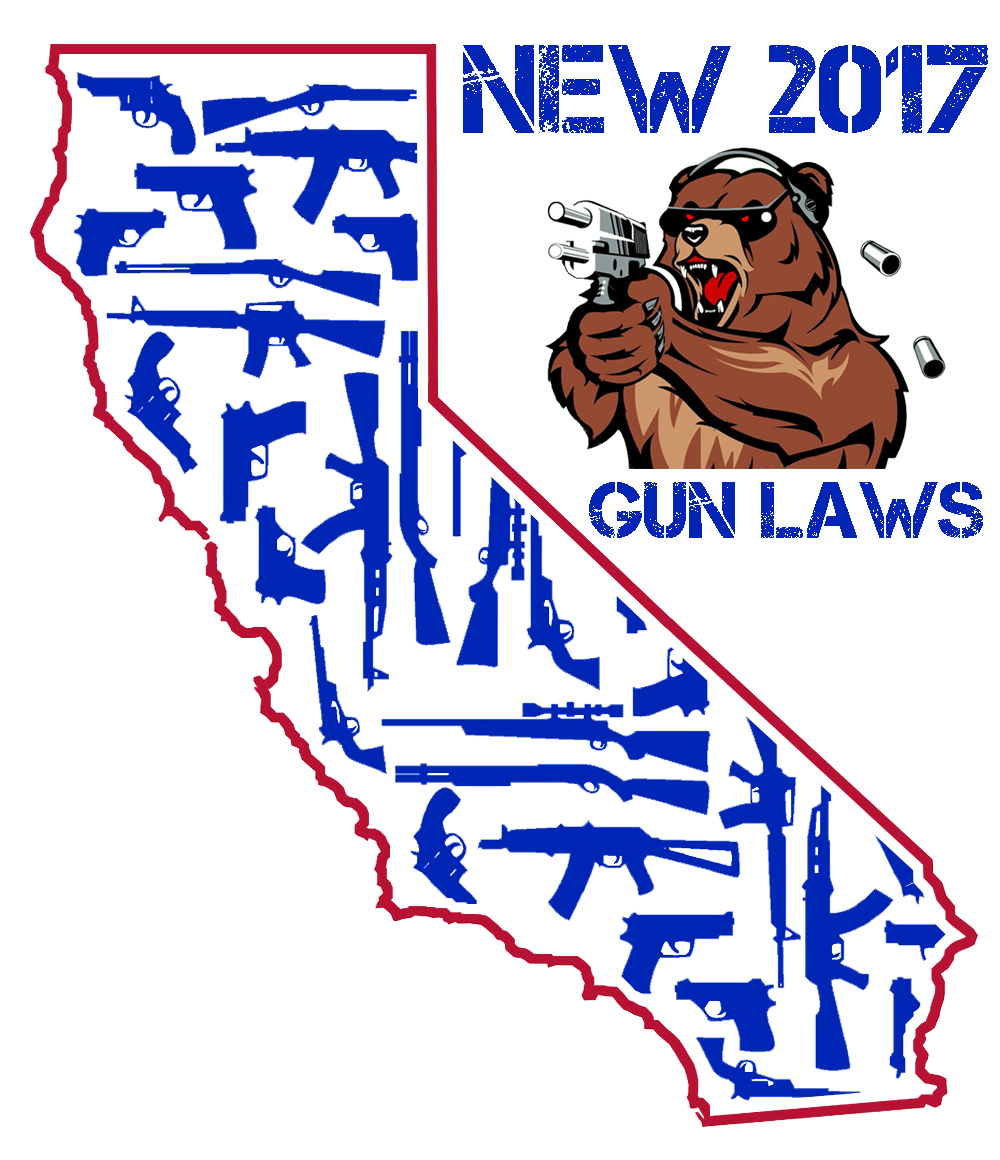
<style>
.page{position:relative;width:1000px;height:1160px;background:#ffffff}
.page>*{position:absolute;margin:0}
.t1{font:125px "Captureit";color:#0025b4}
.t2{font:80.2px "Captureit";color:#0025b4}
</style>
<div class="page">
<p class="t1" style="left:463px;top:45px;width:525px;height:88px">new 2017</p>
<p class="t2" style="left:589px;top:482px;width:394px;height:56px">gun laws</p>
</div>
